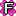
<style>
.page{position:relative;width:16px;height:16px}
.page>*{position:absolute;margin:0}
.t1{font:14px "Verdana";color:#eaeff5;font-weight:bold;scale:1.2 1}
</style>
<div class="page">
<p class="t1" style="left:4px;top:3px;width:9px;height:11px">F</p>
</div>
